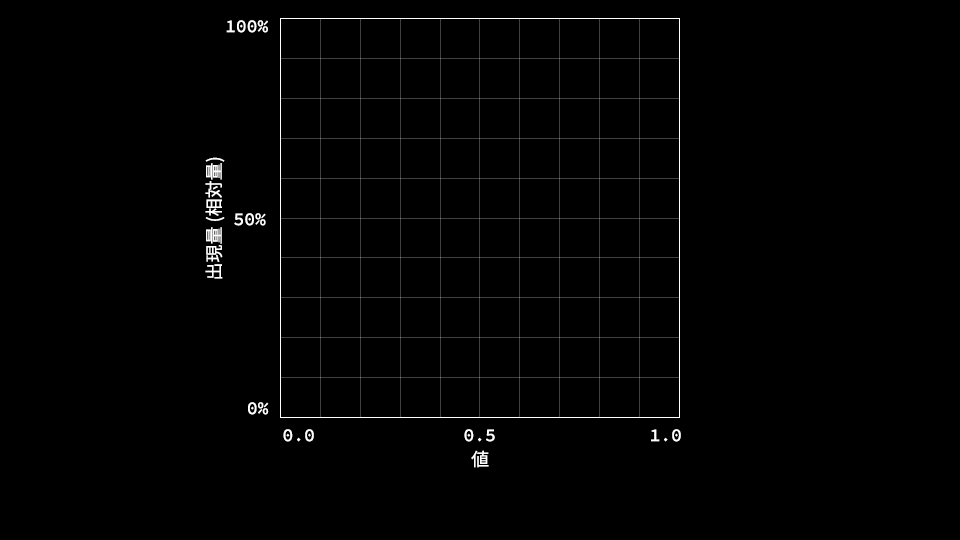
<style>
.page{position:relative;width:960px;height:540px;background:#000000}
.page>*{position:absolute;margin:0}
.t1{font:18px "SourceCodePro-Medium";color:#ffffff}
.t2{font:18px "SourceHanSansJP-Regular";color:#ffffff}
</style>
<div class="page">
<p class="t1" style="left:226px;top:20px;width:42px;height:13px">100%</p>
<p class="t2" style="left:205px;top:157px;width:20px;height:122px;rotate:-90deg">出現量 (相対量)</p>
<p class="t1" style="left:234px;top:213px;width:32px;height:13px">50%</p>
<p class="t1" style="left:248px;top:402px;width:21px;height:13px">0%</p>
<p class="t1" style="left:283px;top:429px;width:31px;height:13px">0.0</p>
<p class="t1" style="left:464px;top:429px;width:31px;height:13px">0.5</p>
<p class="t1" style="left:651px;top:429px;width:30px;height:13px">1.0</p>
<p class="t2" style="left:471px;top:450px;width:18px;height:18px">値</p>
</div>
